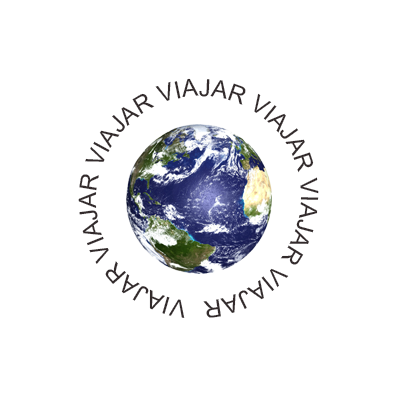
<style>
.page{position:relative;width:400px;height:400px;background:#ffffff}
.page>*{position:absolute;margin:0}
.t1{font:24px "ArialMT";color:#332b2c}
</style>
<div class="page">
<p class="t1" style="left:78px;top:78px;width:241px;height:240px;rotate:-139deg">VIAJAR VIAJAR VIAJAR VIAJAR VIAJAR VIAJAR VIAJAR VIAJAR VIAJAR VIAJAR</p>
</div>
